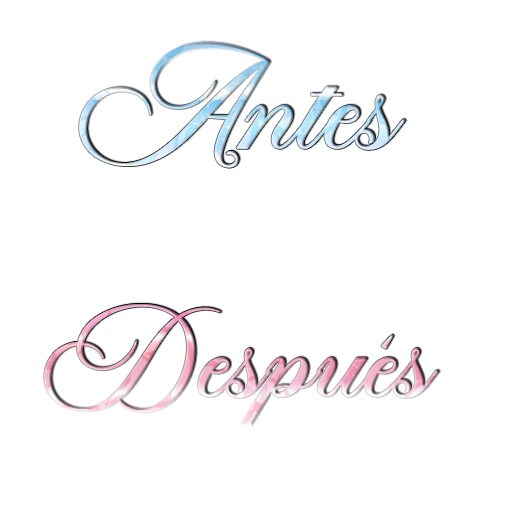
<style>
.page{position:relative;width:512px;height:512px;background:#ffffff}
.page>*{position:absolute;margin:0}
.t1{font:115.6px "Manstein";letter-spacing:-0.04em;font-weight:bold}
.t2{font:103.9px "Manstein";letter-spacing:-0.04em;font-weight:bold}
</style>
<div class="page">
<p class="t1" style="left:79px;top:42px;width:327px;height:126px">Antes</p>
<p class="t2" style="left:44px;top:304px;width:395px;height:121px">Después</p>
</div>
